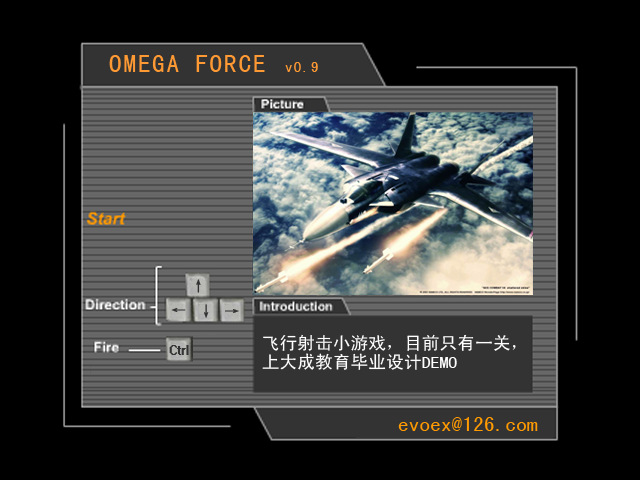
<style>
.page{position:relative;width:640px;height:480px;background:#000000}
.page>*{position:absolute;margin:0}
.t1{font:25px "SimHei";letter-spacing:0.075em;color:#ff9933}
.t2{font:15px "SimHei";letter-spacing:0.075em;color:#ff9933}
.t3{font:15px "System";color:#333333}
.t4{font:17.5px/19px "SimHei";color:#ffffff}
.t5{font:21.5px "SimHei";color:#ff9b00}
</style>
<div class="page">
<p class="t1" style="left:109px;top:55px;width:156px;height:17px">OMEGA FORCE</p>
<p class="t2" style="left:285px;top:62px;width:33px;height:10px">v0.9</p>
<p class="t3" style="left:196px;top:279px;width:5px;height:14px">↑</p>
<p class="t3" style="left:204px;top:304px;width:5px;height:14px">↓</p>
<p class="t3" style="left:171px;top:308px;width:15px;height:4px">←</p>
<p class="t3" style="left:225px;top:309px;width:14px;height:4px">→</p>
<p class="t4" style="left:262px;top:334px;width:254px;height:36px">飞行射击小游戏，目前只有一关，<br>上大成教育毕业设计DEMO</p>
<p class="t3" style="left:169px;top:345px;width:20px;height:10px">Ctrl</p>
<p class="t5" style="left:398px;top:417px;width:140px;height:14px">evoex@126.com</p>
</div>
